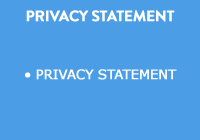
<style>
.page{position:relative;width:200px;height:140px;background:#4b9de6}
.page>*{position:absolute;margin:0}
.t1{font:15px "BrandonGrotesque-Bold";letter-spacing:-0.02em;color:#ffffff;font-weight:bold}
.t2{font:13px "Verdana";letter-spacing:-0.02em;color:#ffffff;font-weight:bold}
</style>
<div class="page">
<p class="t1" style="left:26px;top:10px;width:149px;height:12px">PRIVACY STATEMENT</p>
<p class="t2" style="left:25px;top:69px;width:152px;height:11px">• PRIVACY STATEMENT</p>
</div>
